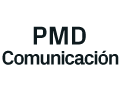
<style>
.page{position:relative;width:122px;height:86px;background:#ffffff}
.page>*{position:absolute;margin:0}
.t1{font:26px "PxGrotesk-Bold";color:#0e1a1e}
.t2{font:20px "PxGrotesk-Bold";letter-spacing:-0.07em;color:#0e1a1e}
</style>
<div class="page">
<p class="t1" style="left:33px;top:26px;width:53px;height:19px">PMD</p>
<p class="t2" style="left:2px;top:50px;width:117px;height:15px">Comunicación</p>
</div>
